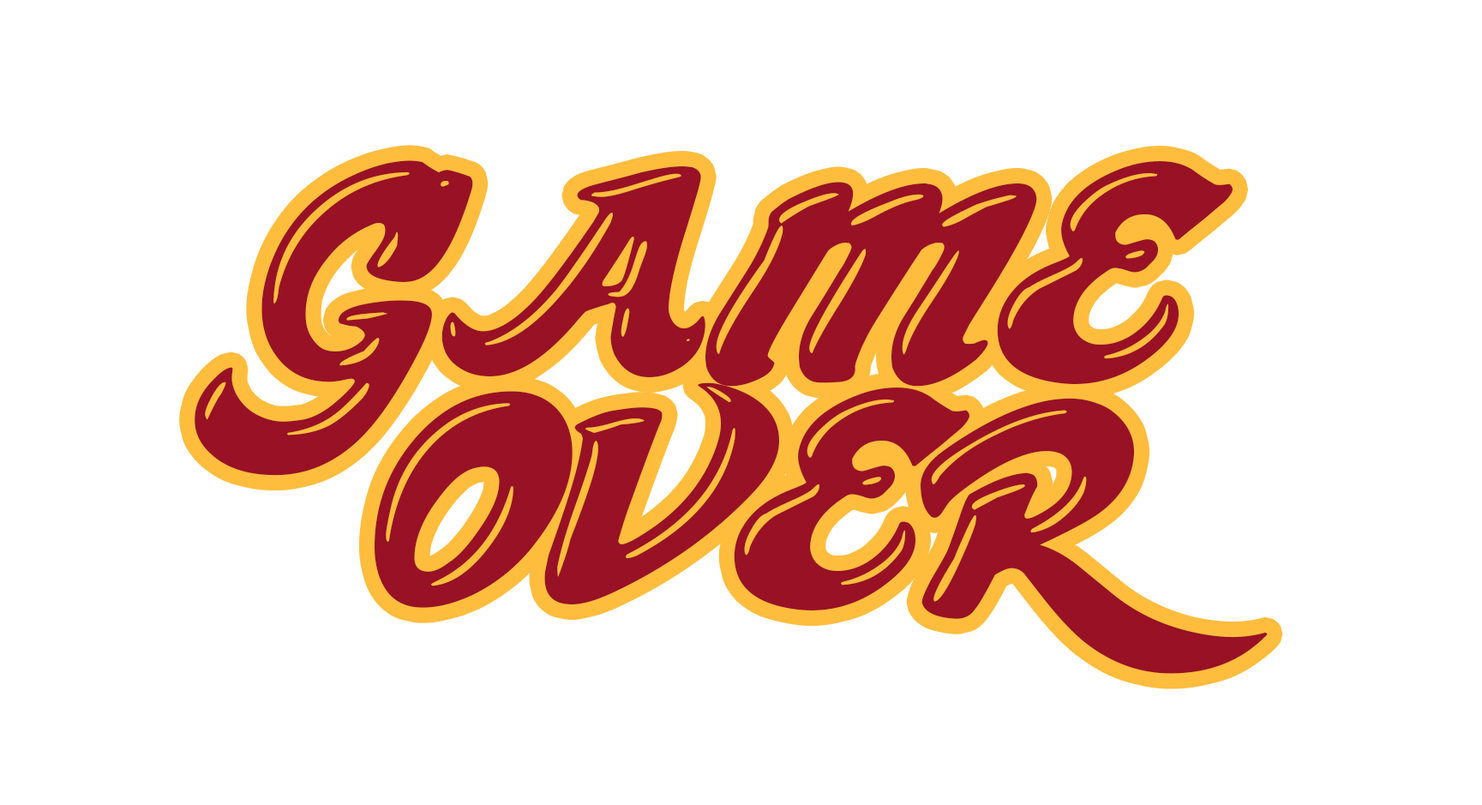
<style>
.page{position:relative;width:1482px;height:805px;background:#ffffff}
.page>*{position:absolute;margin:0}
.t1{font:438.4px/226.8px "ChocolateDealer-Bold";color:#991125}
</style>
<div class="page">
<p class="t1" style="left:195px;top:160px;width:1073px;height:514px;text-align:center">GAME <br> OVER</p>
</div>
